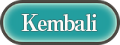
<style>
.page{position:relative;width:120px;height:45px}
.page>*{position:absolute;margin:0}
.t1{font:22px "RyuminPro-ExBold";letter-spacing:-0.08em;color:#fdfbf9}
</style>
<div class="page">
<p class="t1" style="left:21px;top:14px;width:76px;height:17px">Kembali</p>
</div>
